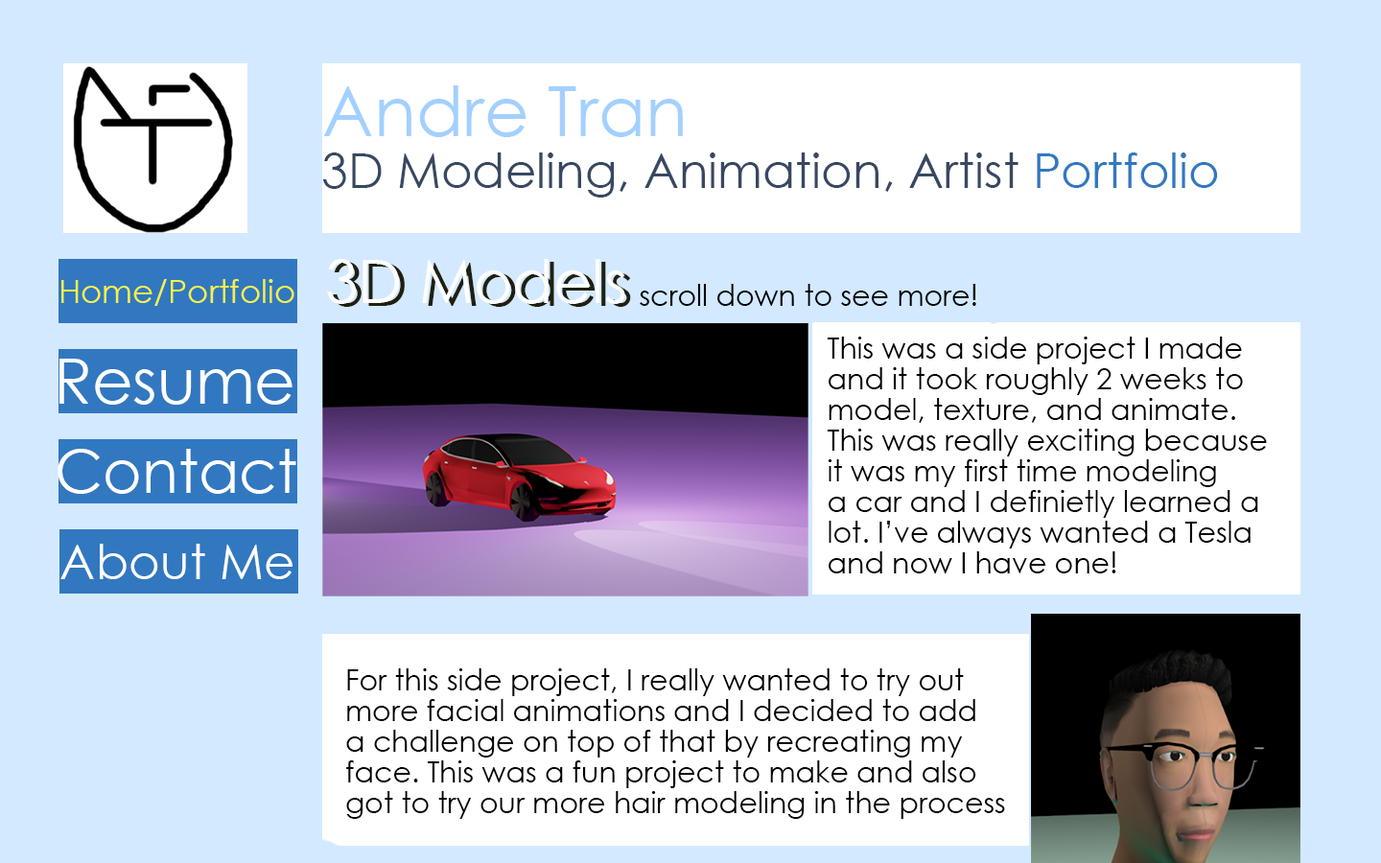
<style>
.page{position:relative;width:1381px;height:863px;background:#d3e9ff}
.page>*{position:absolute;margin:0}
.t1{font:69.1px "CenturyGothic";color:#a3d0ff}
.t2{font:48px "CenturyGothic";color:#374862}
.t3{font:48px "CenturyGothic";color:#3178c0}
.t4{font:59.5px "CenturyGothic";color:#ffffff}
.t5{font:59.5px "CenturyGothic";color:#201f10}
.t6{font:32.6px "CenturyGothic";color:#f7f145}
.t7{font:28.8px "CenturyGothic";color:#000000}
.t8{font:28.8px/30.7px "CenturyGothic";color:#000000}
.t9{font:62.9px "CenturyGothic";color:#ffffff}
.t10{font:48.4px "CenturyGothic";color:#ffffff}
</style>
<div class="page">
<p class="t1" style="left:323px;top:85px;width:360px;height:52px">Andre Tran</p>
<p class="t2" style="left:322px;top:153px;width:896px;height:45px">3D Modeling, Animation, Artist <span class="t3">Portfolio</span></p>
<p class="t4" style="left:327px;top:259px;width:298px;height:45px">3D Models</p>
<p class="t5" style="left:333px;top:262px;width:298px;height:45px">3D Models</p>
<p class="t6" style="left:61px;top:279px;width:233px;height:27px">Home/Portfolio</p>
<p class="t7" style="left:640px;top:284px;width:336px;height:22px">scroll down to see more!</p>
<p class="t8" style="left:827px;top:337px;width:440px;height:237px">This was a side project I made<br>and it took roughly 2 weeks to <br>model, texture, and animate.<br>This was really exciting because<br>it was my first time modeling<br>a car and I definietly learned a<br>lot. I’ve always wanted a Tesla<br>and now I have one!</p>
<p class="t9" style="left:59px;top:359px;width:234px;height:46px">Resume</p>
<p class="t4" style="left:58px;top:449px;width:238px;height:45px">Contact</p>
<p class="t10" style="left:60px;top:544px;width:233px;height:35px">About Me</p>
<p class="t8" style="left:346px;top:669px;width:659px;height:150px">For this side project, I really wanted to try out <br>more facial animations and I decided to add <br>a challenge on top of that by recreating my<br>face. This was a fun project to make and also<br>got to try our more hair modeling in the process</p>
</div>
